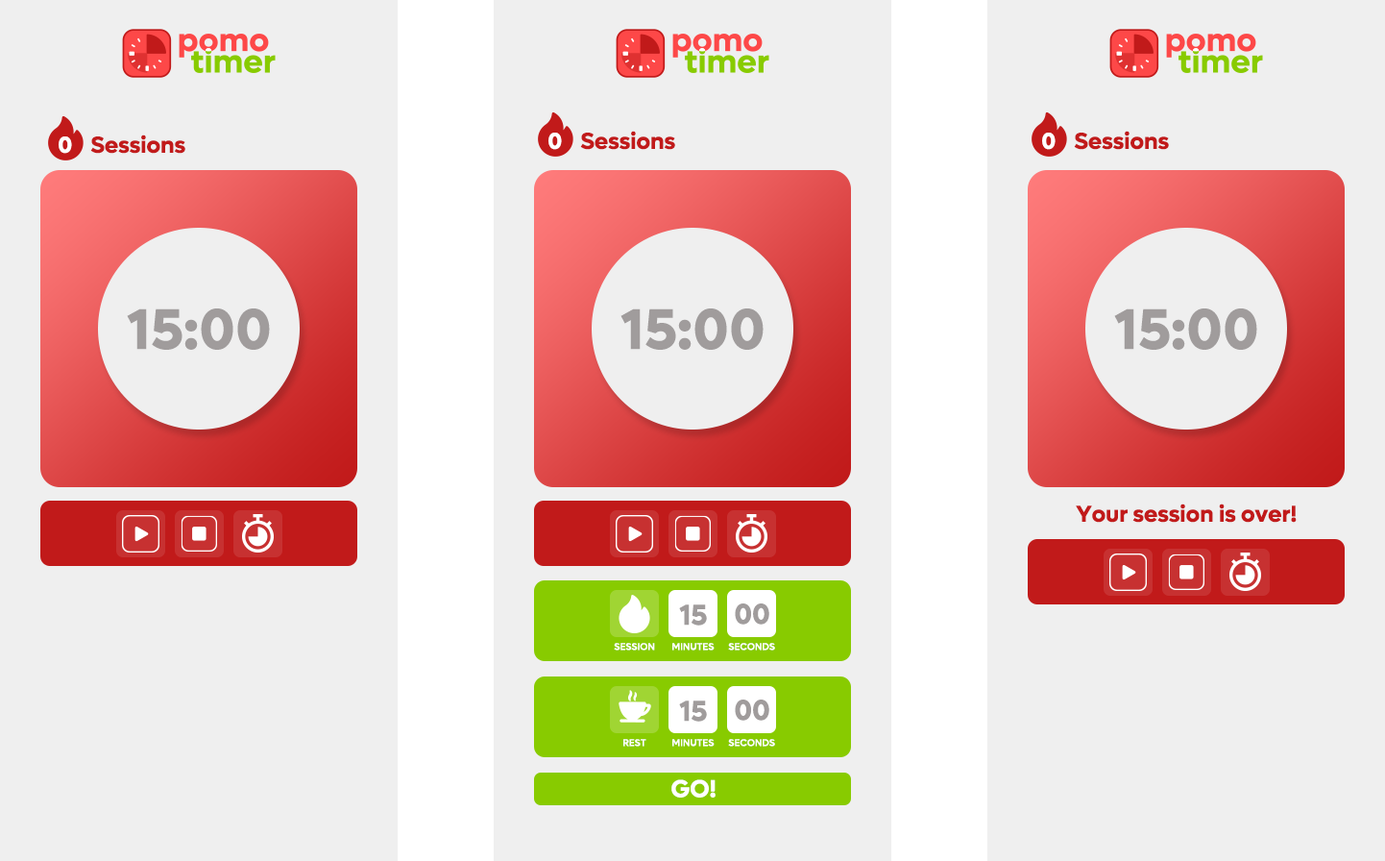
<style>
.page{position:relative;width:1385px;height:861px;background:#efefef}
.page>*{position:absolute;margin:0}
.t1{font:23.1px "Lufga-Bold";color:#ffffff}
.t2{font:23.1px "Lufga-Bold";color:#c11a1a}
.t3{font:57.6px "Lufga-Bold";color:#a09c9c}
.t4{font:28.8px "Lufga-Bold";letter-spacing:-0.01em;color:#a09c9c}
.t5{font:9.6px "Lufga-Medium";letter-spacing:0.01em;color:#ffffff}
.t6{font:24.7px "Lufga-Bold";color:#ffffff}
</style>
<div class="page">
<p class="t1" style="left:59px;top:136px;width:13px;height:18px">0</p>
<p class="t2" style="left:90px;top:134px;width:95px;height:20px">Sessions</p>
<p class="t1" style="left:549px;top:133px;width:13px;height:17px">0</p>
<p class="t2" style="left:580px;top:131px;width:95px;height:19px">Sessions</p>
<p class="t1" style="left:1042px;top:133px;width:14px;height:17px">0</p>
<p class="t2" style="left:1074px;top:131px;width:95px;height:19px">Sessions</p>
<p class="t3" style="left:127px;top:308px;width:143px;height:42px">15:00</p>
<p class="t3" style="left:621px;top:308px;width:143px;height:42px">15:00</p>
<p class="t3" style="left:1114px;top:308px;width:144px;height:42px">15:00</p>
<p class="t2" style="left:1076px;top:503px;width:221px;height:20px">Your session is over!</p>
<p class="t4" style="left:679px;top:604px;width:28px;height:21px">15</p>
<p class="t4" style="left:735px;top:603px;width:35px;height:21px">00</p>
<p class="t5" style="left:614px;top:643px;width:41px;height:7px">SESSION</p>
<p class="t5" style="left:672px;top:643px;width:43px;height:7px">MINUTES</p>
<p class="t5" style="left:728px;top:643px;width:47px;height:7px">SECONDS</p>
<p class="t4" style="left:679px;top:700px;width:28px;height:21px">15</p>
<p class="t4" style="left:735px;top:699px;width:35px;height:22px">00</p>
<p class="t5" style="left:623px;top:739px;width:24px;height:7px">REST</p>
<p class="t5" style="left:672px;top:739px;width:43px;height:7px">MINUTES</p>
<p class="t5" style="left:728px;top:739px;width:47px;height:7px">SECONDS</p>
<p class="t6" style="left:672px;top:779px;width:44px;height:18px">GO!</p>
</div>
